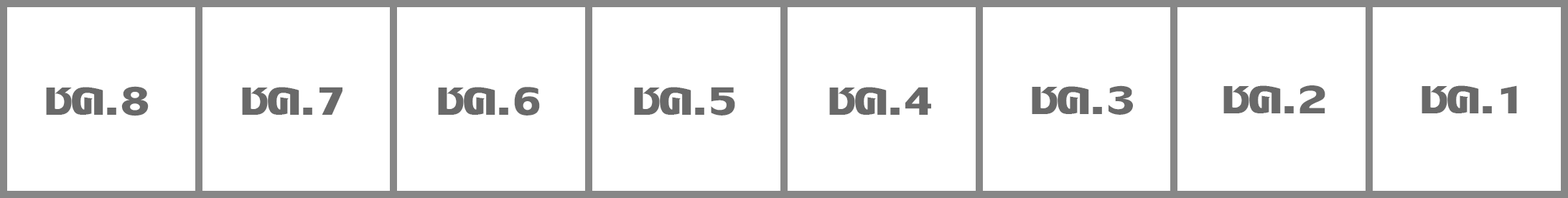
<style>
.page{position:relative;width:1568px;height:198px;background:#ffffff}
.page>*{position:absolute;margin:0}
.t1{font:68.6px "LilyUPCBold";color:#696969}
</style>
<div class="page">
<p class="t1" style="left:46px;top:86px;width:103px;height:30px">ชค.8</p>
<p class="t1" style="left:242px;top:87px;width:100px;height:28px">ชค.7</p>
<p class="t1" style="left:438px;top:87px;width:102px;height:29px">ชค.6</p>
<p class="t1" style="left:634px;top:87px;width:101px;height:29px">ชค.5</p>
<p class="t1" style="left:829px;top:87px;width:102px;height:28px">ชค.4</p>
<p class="t1" style="left:1032px;top:85px;width:101px;height:30px">ชค.3</p>
<p class="t1" style="left:1223px;top:85px;width:102px;height:28px">ชค.2</p>
<p class="t1" style="left:1422px;top:85px;width:95px;height:28px">ชค.1</p>
</div>
